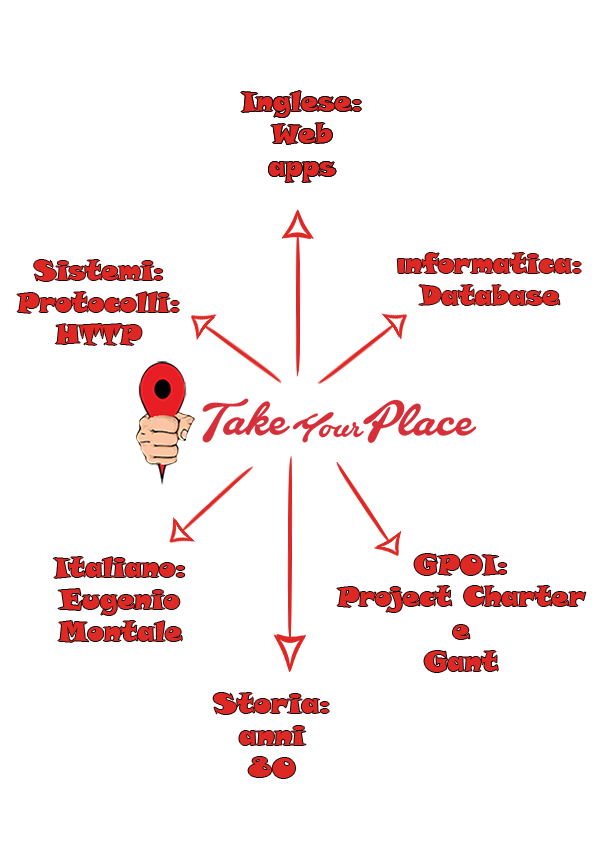
<style>
.page{position:relative;width:595px;height:842px;background:#ffffff}
.page>*{position:absolute;margin:0}
.t1{font:27px "SnapITC-Regular";color:#de2824}
.t2{font:19px "ShowcardGothic-Reg";color:#de2824}
.t3{font:27px "SnapITC-Regular";color:#de2925}
.t4{font:27px "SnapITC-Regular";color:#de2824;scale:1.04 1}
</style>
<div class="page">
<p class="t1" style="left:241px;top:91px;width:120px;height:91px;text-align:center">Inglese:<br>Web<br>apps</p>
<p class="t1" style="left:397px;top:253px;width:184px;height:52px;text-align:center"><span class="t2">I</span>nformatica:<br>Database</p>
<p class="t1" style="left:17px;top:260px;width:162px;height:85px;text-align:center">Sistemi:<br>Protocolli:<br>HTTP</p>
<p class="t3" style="left:53px;top:557px;width:132px;height:85px;text-align:center">Italiano:<br>Eugenio<br>Montale</p>
<p class="t1" style="left:337px;top:554px;width:249px;height:118px;text-align:center">GPOI:<br>Project Charter<br>e<br>Gant</p>
<p class="t4" style="left:213px;top:693px;width:116px;height:85px;text-align:center">Storia:<br>anni<br>80</p>
</div>
